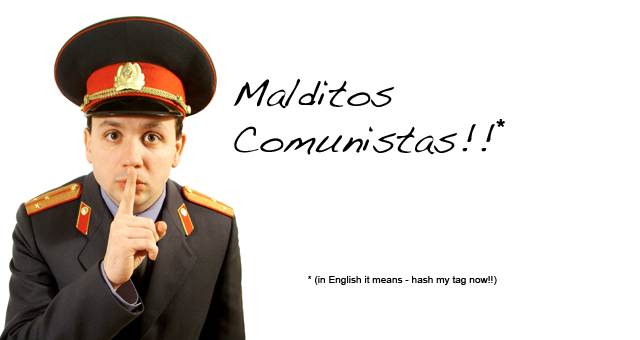
<style>
.page{position:relative;width:640px;height:340px;background:#ffffff}
.page>*{position:absolute;margin:0}
.t1{font:38.9px "Handwriting-Dakota";color:#000000}
.t2{font:33.9px "Impact";color:#000000}
.t3{font:10.1px "ArialMT";color:#000000}
</style>
<div class="page">
<p class="t1" style="left:234px;top:78px;width:261px;height:77px">Malditos <br>Comunistas!!</p>
<p class="t2" style="left:496px;top:119px;width:9px;height:8px">*</p>
<p class="t3" style="left:308px;top:276px;width:189px;height:9px">* (in English it means - hash my tag now!!)</p>
</div>
